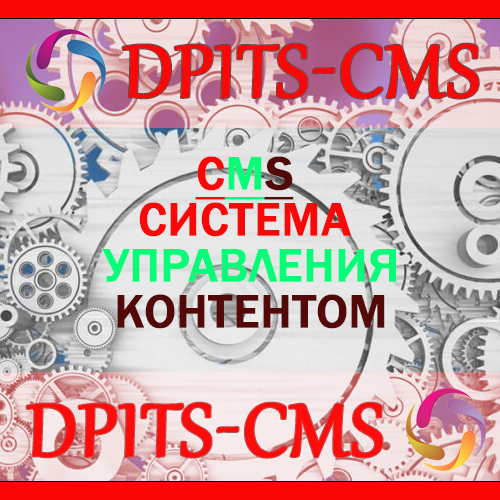
<style>
.page{position:relative;width:500px;height:500px}
.page>*{position:absolute;margin:0}
.t1{font:91px "Gabriola";color:#fc0707;text-transform:uppercase;font-weight:bold}
.t2{font:48px/46px "FranklinGothic-Medium";color:#07fc7a;text-transform:uppercase;font-weight:bold}
.t3{font:48px/46px "FranklinGothic-Medium";color:#fc0707;text-transform:uppercase;font-weight:bold;text-decoration:underline}
.t4{font:48px/46px "FranklinGothic-Medium";color:#07fc7a;text-transform:uppercase;font-weight:bold;text-decoration:underline}
.t5{font:48px/46px "FranklinGothic-Medium";color:#540909;text-transform:uppercase;font-weight:bold;text-decoration:underline}
.t6{font:48px/46px "FranklinGothic-Medium";color:#fc0707;text-transform:uppercase;font-weight:bold}
.t7{font:48px/46px "FranklinGothic-Medium";color:#540909;text-transform:uppercase;font-weight:bold}
</style>
<div class="page">
<p class="t1" style="left:122px;top:43px;width:357px;height:56px">DPITS-CMS</p>
<p class="t2" style="left:102px;top:156px;width:294px;height:173px;text-align:center"><span class="t3">C</span><span class="t4">M</span><span class="t5">S</span><span class="t6"> <br>Система <br></span>управления<br><span class="t7">контентом</span></p>
<p class="t1" style="left:26px;top:402px;width:357px;height:56px">DPITS-CMS</p>
</div>
